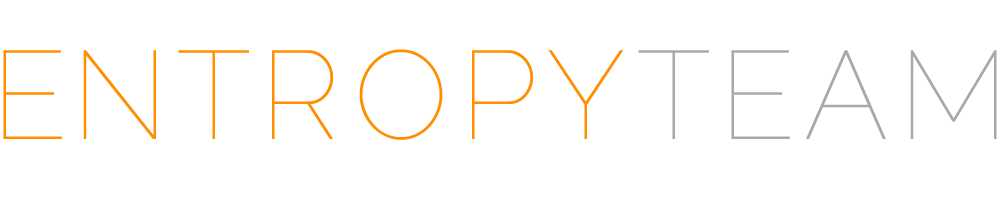
<style>
.page{position:relative;width:1000px;height:200px;background:#ffffff}
.page>*{position:absolute;margin:0}
.t1{font:125px "Raleway-Thin";letter-spacing:0.1em;color:#ff9000}
.t2{font:125px "Raleway-Thin";letter-spacing:0.1em;color:#aaaaaa}
</style>
<div class="page">
<p class="t1" style="left:3px;top:49px;width:994px;height:91px">ENTROPY<span class="t2">TEAM</span></p>
</div>
